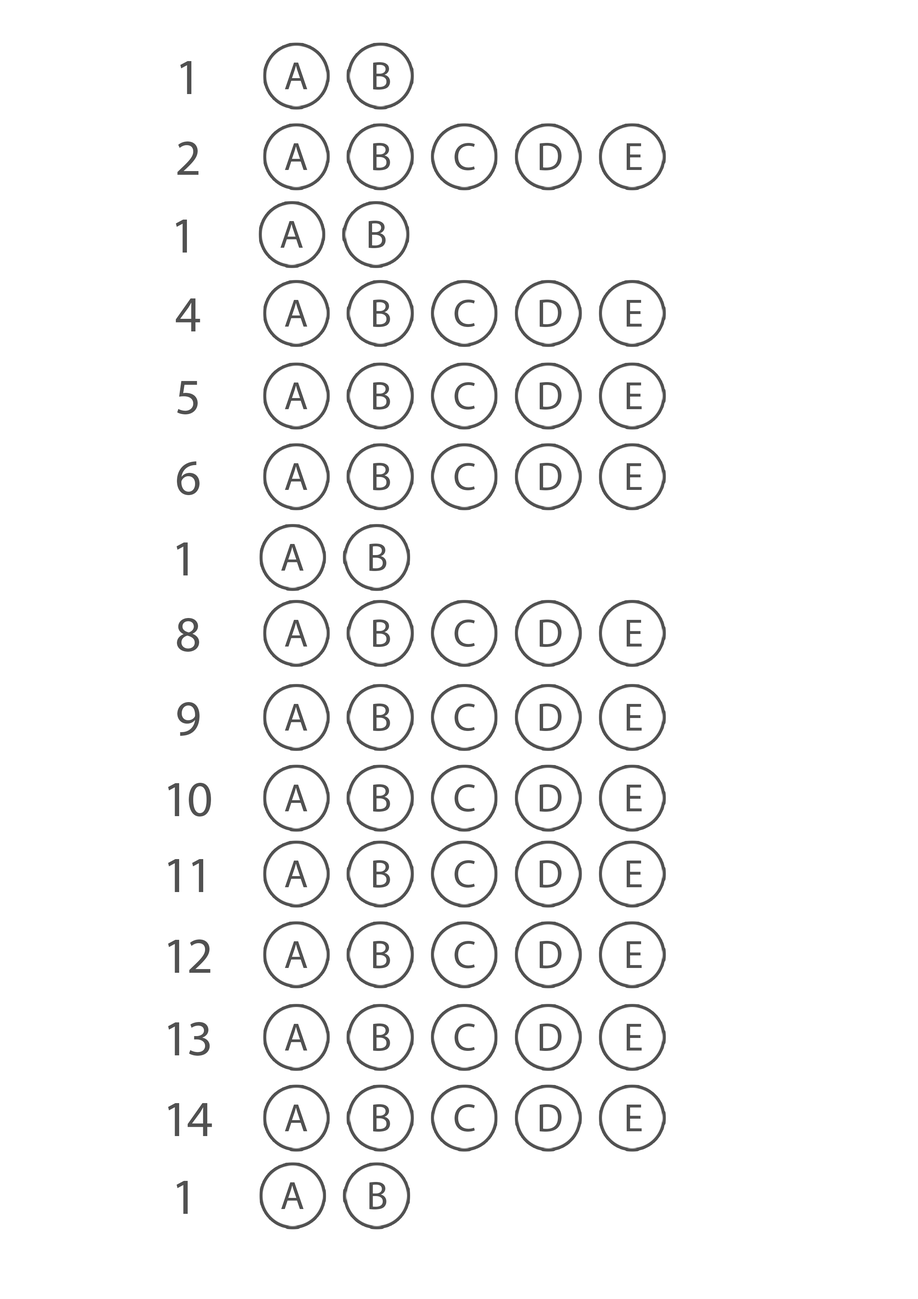
<style>
.page{position:relative;width:918px;height:1299px;background:#ffffff}
.page>*{position:absolute;margin:0}
.t1{font:50.8px "MyriadPro-Regular";letter-spacing:-0.04em;color:#515151}
.t2{font:39.6px "MyriadPro-Regular";letter-spacing:-0.04em;color:#515151}
</style>
<div class="page">
<p class="t1" style="left:180px;top:61px;width:11px;height:33px">1</p>
<p class="t2" style="left:285px;top:63px;width:22px;height:26px">A</p>
<p class="t2" style="left:373px;top:62px;width:17px;height:28px">B</p>
<p class="t1" style="left:177px;top:141px;width:22px;height:34px">2</p>
<p class="t2" style="left:285px;top:143px;width:22px;height:27px">A</p>
<p class="t2" style="left:373px;top:143px;width:17px;height:28px">B</p>
<p class="t2" style="left:455px;top:143px;width:20px;height:27px">C</p>
<p class="t2" style="left:540px;top:143px;width:22px;height:27px">D</p>
<p class="t2" style="left:627px;top:143px;width:15px;height:27px">E</p>
<p class="t1" style="left:176px;top:220px;width:11px;height:32px">1</p>
<p class="t2" style="left:280px;top:221px;width:23px;height:27px">A</p>
<p class="t2" style="left:369px;top:220px;width:17px;height:28px">B</p>
<p class="t1" style="left:176px;top:298px;width:24px;height:33px">4</p>
<p class="t2" style="left:285px;top:300px;width:22px;height:27px">A</p>
<p class="t2" style="left:373px;top:299px;width:17px;height:28px">B</p>
<p class="t2" style="left:455px;top:300px;width:20px;height:27px">C</p>
<p class="t2" style="left:540px;top:299px;width:22px;height:28px">D</p>
<p class="t2" style="left:627px;top:300px;width:15px;height:27px">E</p>
<p class="t1" style="left:177px;top:381px;width:21px;height:33px">5</p>
<p class="t2" style="left:285px;top:382px;width:22px;height:27px">A</p>
<p class="t2" style="left:373px;top:382px;width:17px;height:28px">B</p>
<p class="t2" style="left:455px;top:382px;width:20px;height:27px">C</p>
<p class="t2" style="left:540px;top:382px;width:22px;height:27px">D</p>
<p class="t2" style="left:627px;top:382px;width:15px;height:27px">E</p>
<p class="t1" style="left:177px;top:461px;width:23px;height:34px">6</p>
<p class="t2" style="left:285px;top:463px;width:22px;height:27px">A</p>
<p class="t2" style="left:373px;top:462px;width:17px;height:29px">B</p>
<p class="t2" style="left:455px;top:463px;width:20px;height:27px">C</p>
<p class="t2" style="left:540px;top:462px;width:22px;height:28px">D</p>
<p class="t2" style="left:627px;top:463px;width:15px;height:27px">E</p>
<p class="t1" style="left:177px;top:542px;width:11px;height:33px">1</p>
<p class="t2" style="left:281px;top:544px;width:23px;height:27px">A</p>
<p class="t2" style="left:369px;top:543px;width:18px;height:28px">B</p>
<p class="t1" style="left:177px;top:618px;width:22px;height:34px">8</p>
<p class="t2" style="left:285px;top:620px;width:22px;height:26px">A</p>
<p class="t2" style="left:373px;top:619px;width:17px;height:28px">B</p>
<p class="t2" style="left:455px;top:619px;width:20px;height:28px">C</p>
<p class="t2" style="left:540px;top:619px;width:22px;height:28px">D</p>
<p class="t2" style="left:627px;top:620px;width:15px;height:26px">E</p>
<p class="t1" style="left:177px;top:702px;width:23px;height:34px">9</p>
<p class="t2" style="left:285px;top:704px;width:22px;height:26px">A</p>
<p class="t2" style="left:373px;top:703px;width:17px;height:28px">B</p>
<p class="t2" style="left:455px;top:703px;width:20px;height:28px">C</p>
<p class="t2" style="left:540px;top:703px;width:22px;height:28px">D</p>
<p class="t2" style="left:627px;top:704px;width:15px;height:26px">E</p>
<p class="t1" style="left:168px;top:783px;width:43px;height:33px">10</p>
<p class="t2" style="left:285px;top:784px;width:22px;height:27px">A</p>
<p class="t2" style="left:373px;top:784px;width:17px;height:28px">B</p>
<p class="t2" style="left:455px;top:784px;width:20px;height:28px">C</p>
<p class="t2" style="left:540px;top:784px;width:22px;height:28px">D</p>
<p class="t2" style="left:627px;top:784px;width:15px;height:27px">E</p>
<p class="t1" style="left:168px;top:859px;width:35px;height:33px">11</p>
<p class="t2" style="left:285px;top:860px;width:22px;height:27px">A</p>
<p class="t2" style="left:373px;top:860px;width:17px;height:28px">B</p>
<p class="t2" style="left:455px;top:860px;width:20px;height:27px">C</p>
<p class="t2" style="left:540px;top:860px;width:22px;height:27px">D</p>
<p class="t2" style="left:627px;top:860px;width:15px;height:27px">E</p>
<p class="t1" style="left:168px;top:939px;width:43px;height:34px">12</p>
<p class="t2" style="left:285px;top:941px;width:22px;height:27px">A</p>
<p class="t2" style="left:373px;top:940px;width:17px;height:28px">B</p>
<p class="t2" style="left:455px;top:941px;width:20px;height:27px">C</p>
<p class="t2" style="left:540px;top:940px;width:22px;height:28px">D</p>
<p class="t2" style="left:627px;top:941px;width:15px;height:27px">E</p>
<p class="t1" style="left:168px;top:1022px;width:42px;height:34px">13</p>
<p class="t2" style="left:285px;top:1024px;width:22px;height:26px">A</p>
<p class="t2" style="left:373px;top:1023px;width:17px;height:28px">B</p>
<p class="t2" style="left:455px;top:1023px;width:20px;height:28px">C</p>
<p class="t2" style="left:540px;top:1023px;width:22px;height:28px">D</p>
<p class="t2" style="left:627px;top:1024px;width:15px;height:26px">E</p>
<p class="t1" style="left:168px;top:1103px;width:44px;height:33px">14</p>
<p class="t2" style="left:285px;top:1104px;width:22px;height:27px">A</p>
<p class="t2" style="left:373px;top:1104px;width:17px;height:28px">B</p>
<p class="t2" style="left:455px;top:1104px;width:20px;height:27px">C</p>
<p class="t2" style="left:540px;top:1104px;width:22px;height:27px">D</p>
<p class="t2" style="left:627px;top:1104px;width:15px;height:27px">E</p>
<p class="t1" style="left:177px;top:1181px;width:11px;height:33px">1</p>
<p class="t2" style="left:369px;top:1181px;width:18px;height:29px">B</p>
<p class="t2" style="left:281px;top:1182px;width:23px;height:27px">A</p>
</div>
